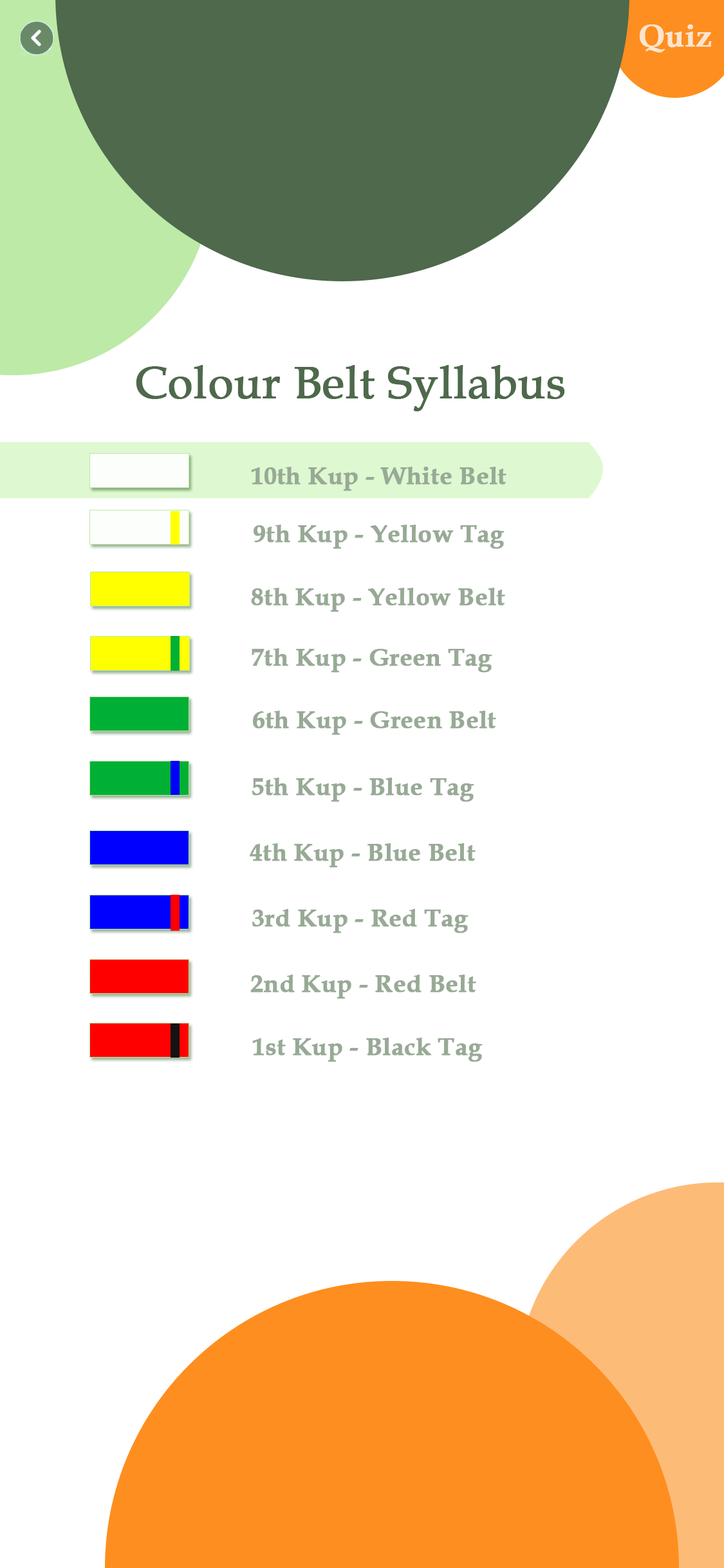
<style>
.page{position:relative;width:724px;height:1568px;background:#ffffff}
.page>*{position:absolute;margin:0}
.t1{font:30.9px "BookAntiqua-Bold";color:#fce5ce;font-weight:bold}
.t2{font:45.1px "BookAntiqua";color:#4e694b;font-weight:bold}
.t3{font:24.5px "BookAntiqua-Bold";color:#98aa96;font-weight:bold}
</style>
<div class="page">
<p class="t1" style="left:639px;top:24px;width:73px;height:29px">Quiz</p>
<p class="t2" style="left:136px;top:365px;width:429px;height:46px">Colour Belt Syllabus</p>
<p class="t3" style="left:251px;top:467px;width:256px;height:24px">10th Kup - White Belt</p>
<p class="t3" style="left:254px;top:525px;width:251px;height:24px">9th Kup - Yellow Tag</p>
<p class="t3" style="left:251px;top:588px;width:254px;height:24px">8th Kup - Yellow Belt</p>
<p class="t3" style="left:252px;top:648px;width:240px;height:25px">7th Kup - Green Tag</p>
<p class="t3" style="left:253px;top:711px;width:243px;height:24px">6th Kup - Green Belt</p>
<p class="t3" style="left:252px;top:778px;width:222px;height:24px">5th Kup - Blue Tag</p>
<p class="t3" style="left:250px;top:843px;width:226px;height:25px">4th Kup - Blue Belt</p>
<p class="t3" style="left:252px;top:909px;width:217px;height:24px">3rd Kup - Red Tag</p>
<p class="t3" style="left:250px;top:975px;width:226px;height:24px">2nd Kup - Red Belt</p>
<p class="t3" style="left:252px;top:1038px;width:231px;height:24px">1st Kup - Black Tag</p>
</div>
